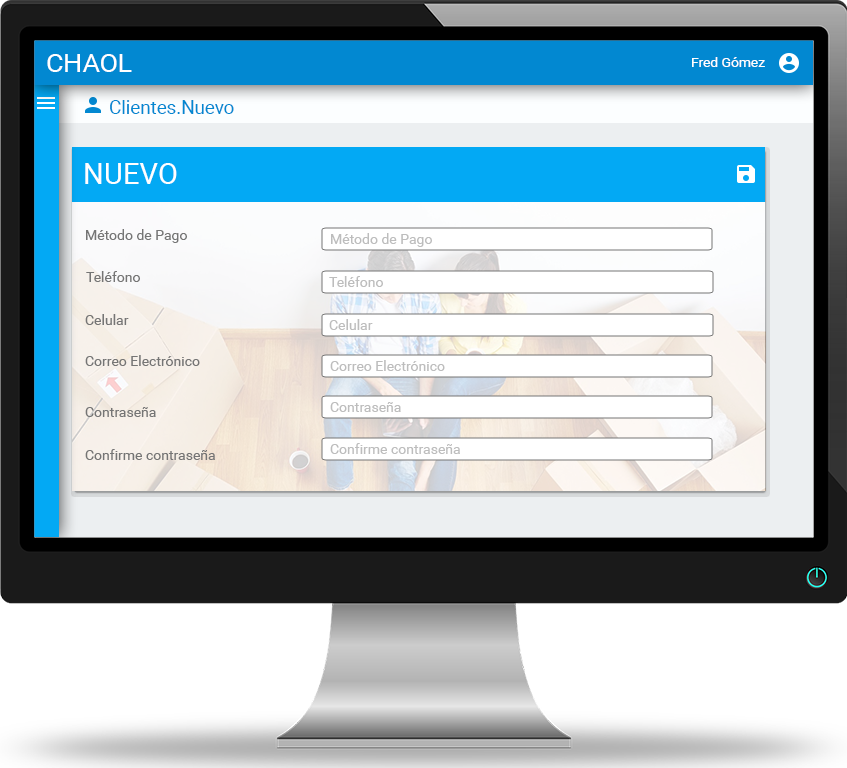
<style>
.page{position:relative;width:847px;height:768px}
.page>*{position:absolute;margin:0}
.t1{font:25.7px "Roboto-Regular";color:#ffffff}
.t2{font:13.3px "Roboto-Regular";color:#ffffff;scale:1.04 1}
.t3{font:18.6px "Roboto-Regular";color:#0288d1}
.t4{font:29.1px "Roboto-Regular";color:#ffffff}
.t5{font:14px "Roboto-Regular";color:#757575}
.t6{font:14px "Roboto-Regular";color:#bdbdbd}
</style>
<div class="page">
<p class="t1" style="left:47px;top:54px;width:85px;height:18px">CHAOL</p>
<p class="t2" style="left:692px;top:57px;width:73px;height:10px">Fred Gómez</p>
<p class="t3" style="left:110px;top:100px;width:124px;height:14px">Clientes.Nuevo</p>
<p class="t4" style="left:85px;top:163px;width:92px;height:21px">NUEVO</p>
<p class="t5" style="left:86px;top:229px;width:101px;height:14px">Método de Pago</p>
<p class="t6" style="left:331px;top:233px;width:101px;height:14px">Método de Pago</p>
<p class="t5" style="left:86px;top:271px;width:54px;height:11px">Teléfono</p>
<p class="t6" style="left:329px;top:276px;width:54px;height:11px">Teléfono</p>
<p class="t5" style="left:85px;top:314px;width:44px;height:11px">Celular</p>
<p class="t6" style="left:329px;top:319px;width:44px;height:11px">Celular</p>
<p class="t5" style="left:85px;top:355px;width:115px;height:11px">Correo Electrónico</p>
<p class="t6" style="left:330px;top:360px;width:115px;height:11px">Correo Electrónico</p>
<p class="t5" style="left:85px;top:407px;width:71px;height:10px">Contraseña</p>
<p class="t6" style="left:330px;top:402px;width:71px;height:10px">Contraseña</p>
<p class="t5" style="left:85px;top:449px;width:130px;height:11px">Confirme contraseña</p>
<p class="t6" style="left:330px;top:443px;width:130px;height:11px">Confirme contraseña</p>
</div>
